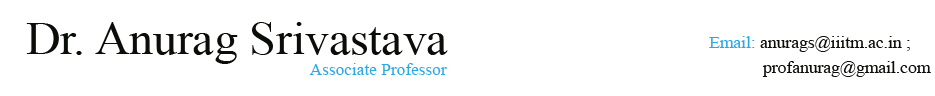
<style>
.page{position:relative;width:935px;height:96px;background:#ffffff}
.page>*{position:absolute;margin:0}
.t1{font:45.8px "TimesNewRomanPSMT";color:#0a0d08;scale:1.04 1}
.t2{font:16.7px "TimesNewRomanPSMT";color:#0a0d08;scale:1.05 1}
.t3{font:16.7px "TimesNewRomanPSMT";color:#2ca9e4;scale:1.05 1}
.t4{font:16.7px "TimesNewRomanPSMT";color:#2ca9e4;scale:1.04 1}
</style>
<div class="page">
<p class="t1" style="left:26px;top:22px;width:422px;height:42px">Dr. Anurag Srivastava</p>
<p class="t2" style="left:709px;top:36px;width:201px;height:16px"><span class="t3">Email: </span>anurags@iiitm.ac.in ;</p>
<p class="t4" style="left:309px;top:63px;width:138px;height:12px">Associate Professor</p>
<p class="t2" style="left:762px;top:61px;width:169px;height:16px">profanurag@gmail.com</p>
</div>
